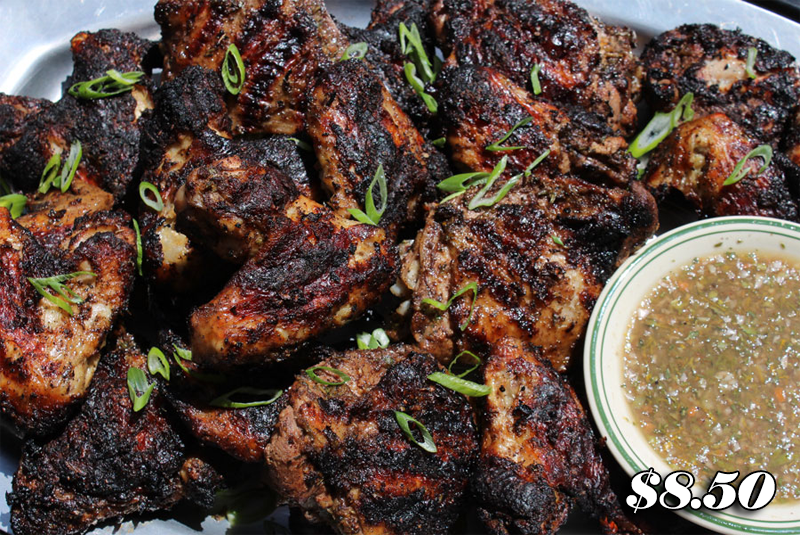
<style>
.page{position:relative;width:800px;height:535px}
.page>*{position:absolute;margin:0}
.t1{font:48px "Elephant-Italic";color:#ffffff}
</style>
<div class="page">
<p class="t1" style="left:626px;top:469px;width:149px;height:45px">$8.50</p>
</div>
